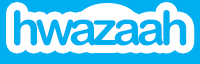
<style>
.page{position:relative;width:200px;height:64px;background:#00aff0}
.page>*{position:absolute;margin:0}
.t1{font:48px "ArialRoundedMTBold";letter-spacing:-0.1em;color:#00aff0}
</style>
<div class="page">
<p class="t1" style="left:14px;top:10px;width:173px;height:36px">hwazaah</p>
</div>
